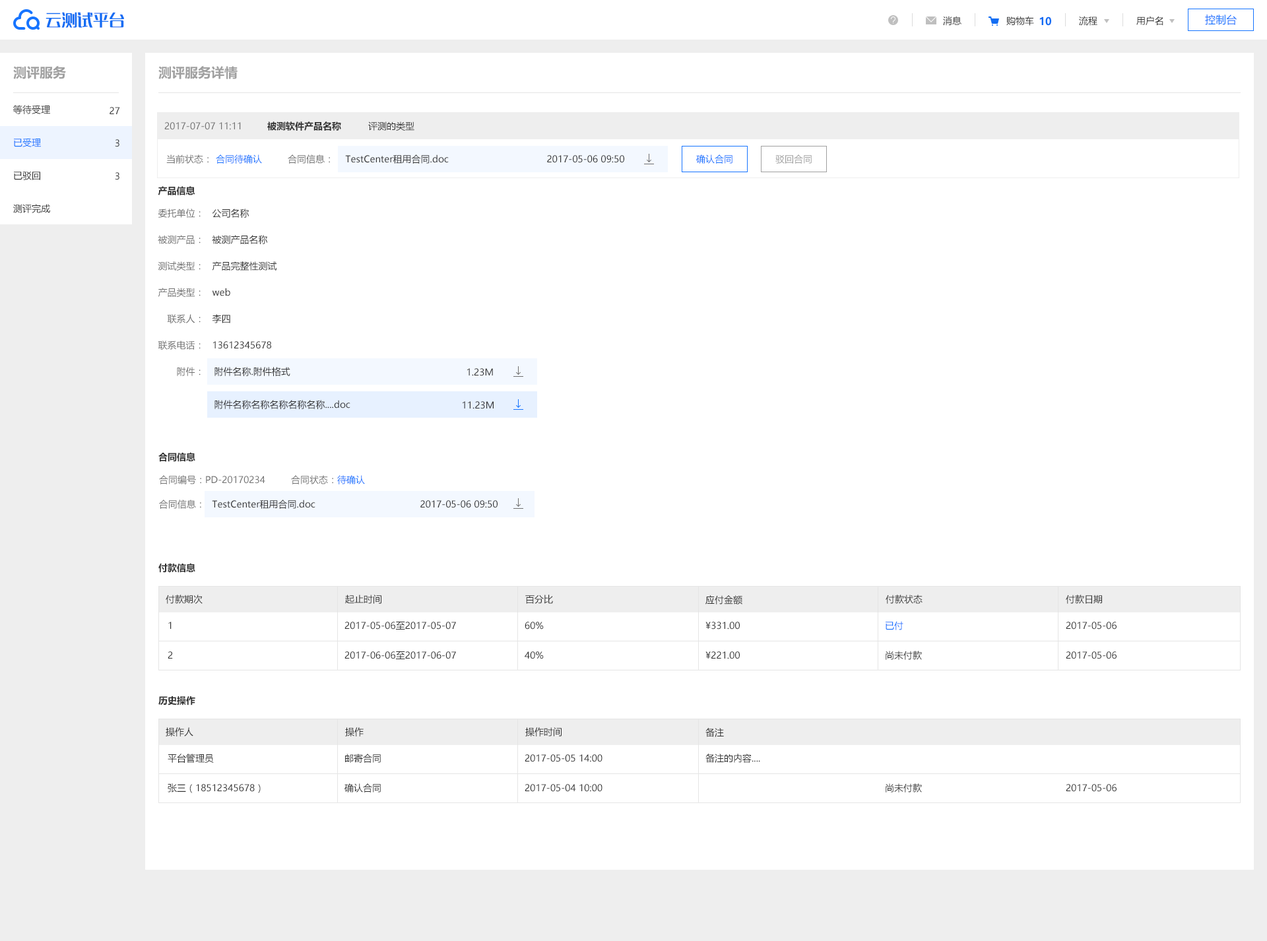
<style>
.page{position:relative;width:1267px;height:941px;background:#ffffff}
.page>*{position:absolute;margin:0}
.t1{font:15.8px "MFLangQian_Noncommercial-Regular";color:#136df3}
.t2{font:9.2px "MicrosoftYaHei";color:#313131}
.t3{font:10.6px "MicrosoftYaHei-Bold";color:#136df3}
.t4{font:10.6px "MicrosoftYaHei";color:#1674ff}
.t5{font:13.2px "MicrosoftYaHei-Bold";color:#a0a0a0}
.t6{font:9.2px "MicrosoftYaHei";color:#707070}
.t7{font:9.2px "MicrosoftYaHei-Bold";color:#313131}
.t8{font:9.2px "MicrosoftYaHei";color:#1674ff}
.t9{font:9.2px "MicrosoftYaHei";color:#a0a0a0}
</style>
<div class="page">
<p class="t1" style="left:46px;top:12px;width:78px;height:16px">云测试平台</p>
<p class="t2" style="left:943px;top:16px;width:19px;height:10px">消息</p>
<p class="t2" style="left:1006px;top:16px;width:28px;height:10px">购物车</p>
<p class="t3" style="left:1039px;top:16px;width:12px;height:10px">10</p>
<p class="t2" style="left:1079px;top:16px;width:18px;height:10px">流程</p>
<p class="t2" style="left:1136px;top:16px;width:27px;height:10px">用户名</p>
<p class="t4" style="left:1205px;top:15px;width:32px;height:10px">控制台</p>
<p class="t5" style="left:13px;top:66px;width:53px;height:13px">测评服务</p>
<p class="t5" style="left:158px;top:66px;width:80px;height:13px">测评服务详情</p>
<p class="t2" style="left:13px;top:105px;width:37px;height:9px">等待受理</p>
<p class="t2" style="left:110px;top:107px;width:10px;height:7px">27</p>
<p class="t6" style="left:164px;top:122px;width:77px;height:8px">2017-07-07 11:11</p>
<p class="t7" style="left:267px;top:121px;width:74px;height:10px">被测软件产品名称</p>
<p class="t2" style="left:368px;top:121px;width:46px;height:10px">评测的类型</p>
<p class="t8" style="left:14px;top:138px;width:27px;height:9px">已受理</p>
<p class="t2" style="left:115px;top:139px;width:4px;height:8px">3</p>
<p class="t6" style="left:166px;top:154px;width:43px;height:10px">当前状态：</p>
<p class="t8" style="left:216px;top:154px;width:46px;height:10px">合同待确认</p>
<p class="t6" style="left:288px;top:154px;width:42px;height:10px">合同信息：</p>
<p class="t2" style="left:345px;top:154px;width:104px;height:10px">TestCenter租用合同.doc</p>
<p class="t2" style="left:547px;top:155px;width:77px;height:8px">2017-05-06 09:50</p>
<p class="t8" style="left:696px;top:154px;width:37px;height:10px">确认合同</p>
<p class="t9" style="left:775px;top:154px;width:37px;height:10px">驳回合同</p>
<p class="t2" style="left:14px;top:171px;width:26px;height:9px">已驳回</p>
<p class="t2" style="left:115px;top:172px;width:4px;height:8px">3</p>
<p class="t7" style="left:158px;top:186px;width:37px;height:9px">产品信息</p>
<p class="t2" style="left:13px;top:204px;width:37px;height:9px">测评完成</p>
<p class="t6" style="left:158px;top:209px;width:43px;height:9px">委托单位：</p>
<p class="t2" style="left:212px;top:209px;width:37px;height:9px">公司名称</p>
<p class="t6" style="left:158px;top:235px;width:43px;height:9px">被测产品：</p>
<p class="t2" style="left:212px;top:235px;width:56px;height:9px">被测产品名称</p>
<p class="t6" style="left:158px;top:261px;width:43px;height:10px">测试类型：</p>
<p class="t2" style="left:212px;top:261px;width:65px;height:10px">产品完整性测试</p>
<p class="t6" style="left:158px;top:288px;width:43px;height:9px">产品类型：</p>
<p class="t2" style="left:212px;top:288px;width:18px;height:8px">web</p>
<p class="t6" style="left:167px;top:314px;width:34px;height:9px">联系人：</p>
<p class="t2" style="left:212px;top:314px;width:18px;height:9px">李四</p>
<p class="t6" style="left:158px;top:341px;width:43px;height:9px">联系电话：</p>
<p class="t2" style="left:213px;top:341px;width:58px;height:8px">13612345678</p>
<p class="t6" style="left:177px;top:367px;width:24px;height:9px">附件：</p>
<p class="t2" style="left:214px;top:367px;width:76px;height:9px">附件名称.附件格式</p>
<p class="t2" style="left:467px;top:368px;width:26px;height:8px">1.23M</p>
<p class="t2" style="left:214px;top:400px;width:136px;height:9px">附件名称名称名称名称名称....doc</p>
<p class="t2" style="left:463px;top:401px;width:31px;height:8px">11.23M</p>
<p class="t7" style="left:158px;top:452px;width:37px;height:10px">合同信息</p>
<p class="t6" style="left:159px;top:475px;width:106px;height:9px">合同编号：PD-20170234</p>
<p class="t6" style="left:291px;top:475px;width:74px;height:9px">合同状态：<span class="t8">待确认</span></p>
<p class="t6" style="left:159px;top:500px;width:42px;height:9px">合同信息：</p>
<p class="t2" style="left:212px;top:500px;width:103px;height:9px">TestCenter租用合同.doc</p>
<p class="t2" style="left:420px;top:500px;width:78px;height:8px">2017-05-06 09:50</p>
<p class="t7" style="left:158px;top:563px;width:37px;height:10px">付款信息</p>
<p class="t2" style="left:166px;top:595px;width:37px;height:9px">付款期次</p>
<p class="t2" style="left:345px;top:595px;width:36px;height:9px">起止时间</p>
<p class="t2" style="left:525px;top:595px;width:28px;height:9px">百分比</p>
<p class="t2" style="left:705px;top:595px;width:37px;height:10px">应付金额</p>
<p class="t2" style="left:886px;top:595px;width:37px;height:9px">付款状态</p>
<p class="t2" style="left:1066px;top:595px;width:36px;height:9px">付款日期</p>
<p class="t2" style="left:168px;top:622px;width:4px;height:7px">1</p>
<p class="t2" style="left:344px;top:622px;width:112px;height:8px">2017-05-06至2017-05-07</p>
<p class="t2" style="left:525px;top:622px;width:19px;height:8px">60%</p>
<p class="t2" style="left:705px;top:622px;width:35px;height:8px">¥331.00</p>
<p class="t8" style="left:886px;top:621px;width:17px;height:9px">已付</p>
<p class="t2" style="left:1066px;top:622px;width:51px;height:8px">2017-05-06</p>
<p class="t2" style="left:168px;top:651px;width:5px;height:8px">2</p>
<p class="t2" style="left:344px;top:651px;width:112px;height:8px">2017-06-06至2017-06-07</p>
<p class="t2" style="left:525px;top:651px;width:19px;height:8px">40%</p>
<p class="t2" style="left:705px;top:651px;width:35px;height:8px">¥221.00</p>
<p class="t2" style="left:886px;top:651px;width:36px;height:9px">尚未付款</p>
<p class="t2" style="left:1066px;top:651px;width:51px;height:8px">2017-05-06</p>
<p class="t7" style="left:158px;top:696px;width:37px;height:9px">历史操作</p>
<p class="t2" style="left:166px;top:727px;width:27px;height:9px">操作人</p>
<p class="t2" style="left:345px;top:727px;width:19px;height:9px">操作</p>
<p class="t2" style="left:525px;top:727px;width:37px;height:9px">操作时间</p>
<p class="t2" style="left:705px;top:728px;width:19px;height:9px">备注</p>
<p class="t2" style="left:168px;top:754px;width:46px;height:9px">平台管理员</p>
<p class="t2" style="left:345px;top:754px;width:36px;height:9px">邮寄合同</p>
<p class="t2" style="left:525px;top:754px;width:78px;height:8px">2017-05-05 14:00</p>
<p class="t2" style="left:705px;top:754px;width:55px;height:9px">备注的内容....</p>
<p class="t2" style="left:168px;top:783px;width:93px;height:10px">张三（18512345678）</p>
<p class="t2" style="left:344px;top:783px;width:37px;height:10px">确认合同</p>
<p class="t2" style="left:525px;top:784px;width:78px;height:8px">2017-05-04 10:00</p>
<p class="t2" style="left:886px;top:783px;width:36px;height:10px">尚未付款</p>
<p class="t2" style="left:1066px;top:784px;width:51px;height:8px">2017-05-06</p>
</div>
